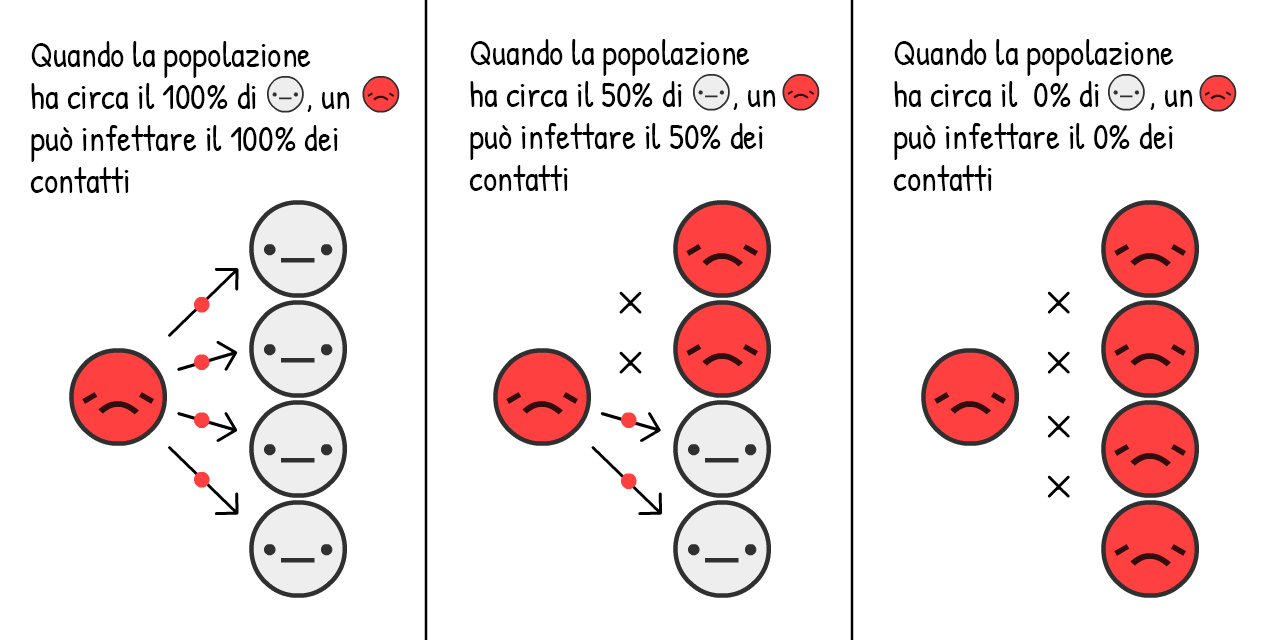
<style>
.page{position:relative;width:1280px;height:640px;background:#ffffff}
.page>*{position:absolute;margin:0}
.t1{font:35px "PatrickHand-Regular";color:#000000}
</style>
<div class="page">
<p class="t1" style="left:30px;top:41px;width:320px;height:152px">Quando la popolazione<br>ha circa il 100% di      , un       <br>può infettare il 100% dei <br>contatti</p>
<p class="t1" style="left:469px;top:39px;width:307px;height:152px">Quando la popolazione<br>ha circa il 50% di      , un       <br>può infettare il 50% dei <br>contatti</p>
<p class="t1" style="left:893px;top:39px;width:300px;height:152px">Quando la popolazione<br>ha circa il  0% di      , un       <br>può infettare il 0% dei <br>contatti</p>
</div>
